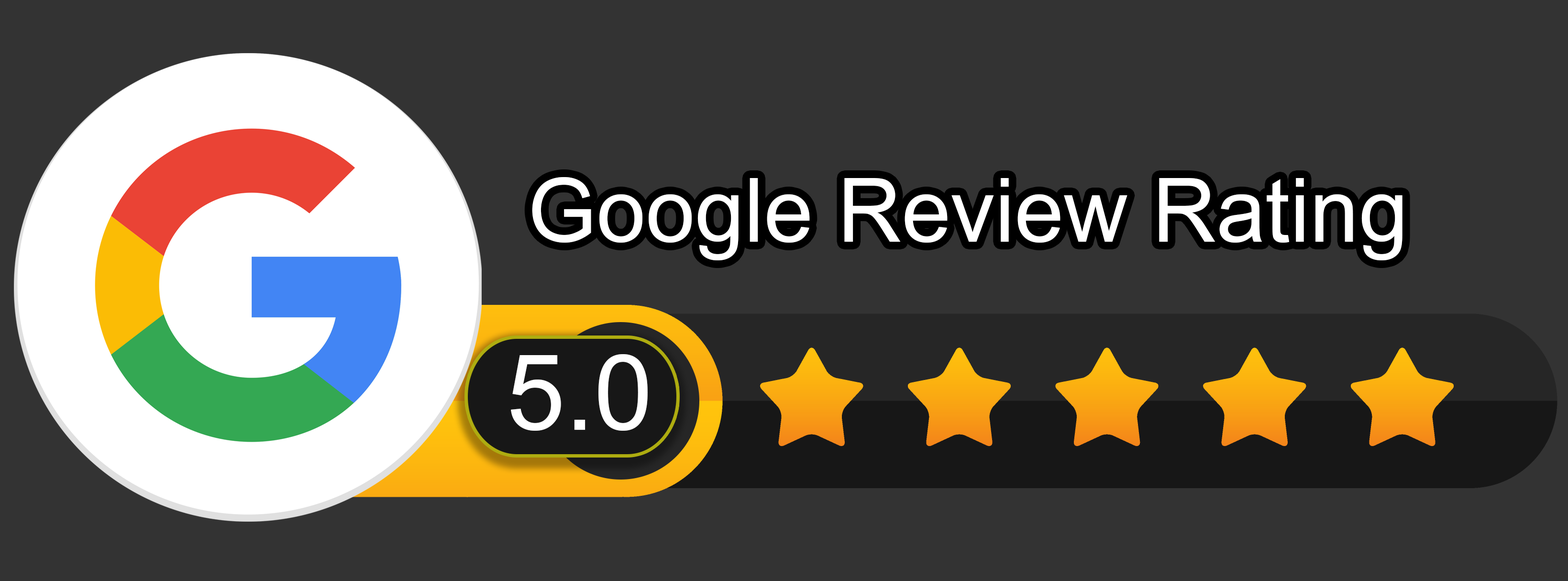
<style>
.page{position:relative;width:1568px;height:581px;background:#333333}
.page>*{position:absolute;margin:0}
.t1{font:88.5px "ArialMT";color:#ffffff}
.t2{font:105.2px "ArialMT";color:#ffffff}
</style>
<div class="page">
<p class="t1" style="left:532px;top:177px;width:870px;height:83px">Google Review Rating</p>
<p class="t2" style="left:511px;top:354px;width:137px;height:77px">5.0</p>
</div>
